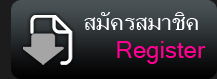
<style>
.page{position:relative;width:217px;height:79px}
.page>*{position:absolute;margin:0}
.t1{font:24px "MicrosoftSansSerif";color:#ffffff}
.t2{font:24px "MicrosoftSansSerif";color:#ff0090}
</style>
<div class="page">
<p class="t1" style="left:84px;top:12px;width:114px;height:18px">สมัครสมาชิค</p>
<p class="t2" style="left:117px;top:41px;width:89px;height:23px">Register</p>
</div>
